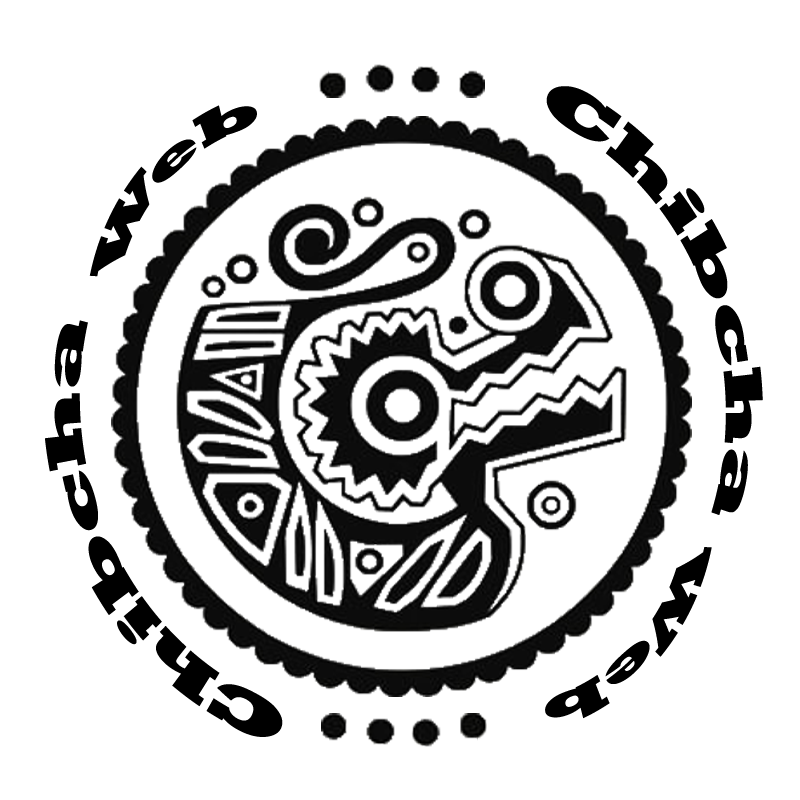
<style>
.page{position:relative;width:800px;height:800px;background:#ffffff}
.page>*{position:absolute;margin:0}
.t1{font:54.2px "Rockwell-ExtraBold";color:#000000;scale:1.07 1}
.t2{font:46.4px "Rockwell-ExtraBold";color:#000000}
</style>
<div class="page">
<p class="t1" style="left:546px;top:86px;width:217px;height:429px;rotate:85deg">Chibcha</p>
<p class="t2" style="left:89px;top:105px;width:168px;height:172px;rotate:-25deg">Web</p>
<p class="t1" style="left:45px;top:320px;width:238px;height:417px;rotate:-99deg">Chibcha</p>
<p class="t2" style="left:545px;top:547px;width:167px;height:172px;rotate:154deg">Web</p>
</div>
